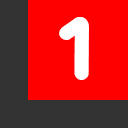
<style>
.page{position:relative;width:128px;height:128px;background:#ff0000}
.page>*{position:absolute;margin:0}
.t1{font:96.2px "Mabook";letter-spacing:0.075em;color:#ffffff}
</style>
<div class="page">
<p class="t1" style="left:59px;top:17px;width:30px;height:63px">1</p>
</div>
